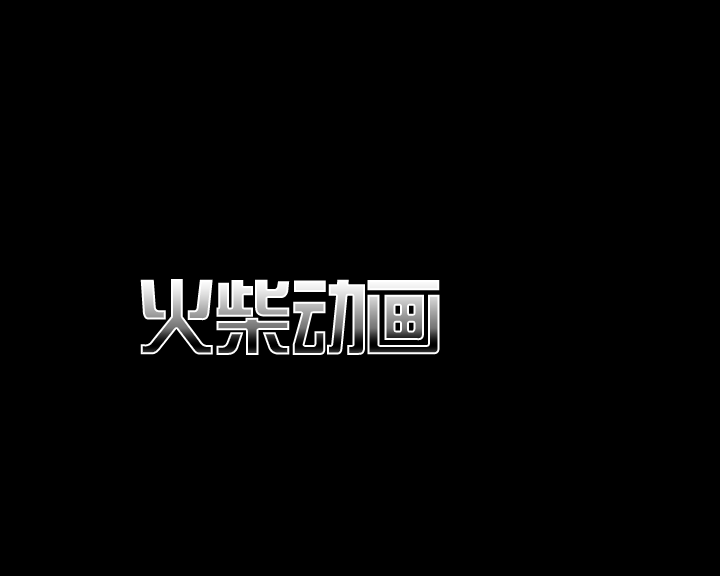
<style>
.page{position:relative;width:720px;height:576px;background:#000000}
.page>*{position:absolute;margin:0}
.t1{font:84px "FZZYJW--GB1-0";letter-spacing:-0.075em}
</style>
<div class="page">
<p class="t1" style="left:140px;top:279px;width:300px;height:76px">火柴动画</p>
</div>
